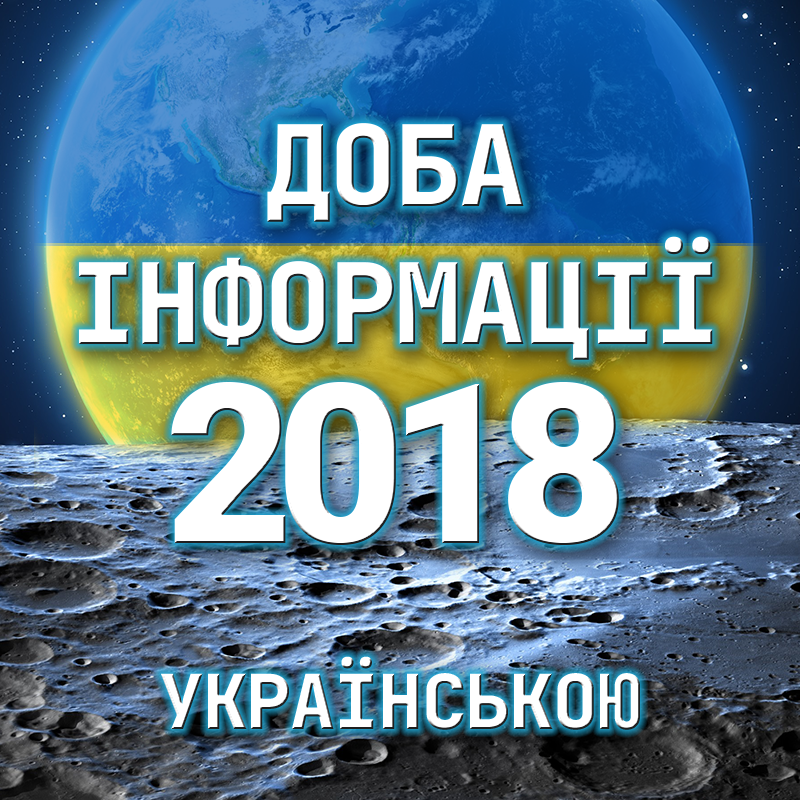
<style>
.page{position:relative;width:800px;height:800px}
.page>*{position:absolute;margin:0}
.t1{font:112px/138.2px "JetBrainsMonoRoman-ExtraBold";letter-spacing:-0.02em;color:#ffffff}
.t2{font:223px "Roboto-Black";letter-spacing:-0.08em;color:#ffffff}
.t3{font:75.5px "JetBrainsMonoRoman-ExtraBold";letter-spacing:-0.02em;color:#ffffff}
</style>
<div class="page">
<p class="t1" style="left:78px;top:123px;width:635px;height:237px;text-align:center">ДОБА<br>ІНФОРМАЦІЇ</p>
<p class="t2" style="left:171px;top:382px;width:448px;height:163px">2018</p>
<p class="t3" style="left:161px;top:656px;width:479px;height:74px">УКРАЇНСЬКОЮ</p>
</div>
